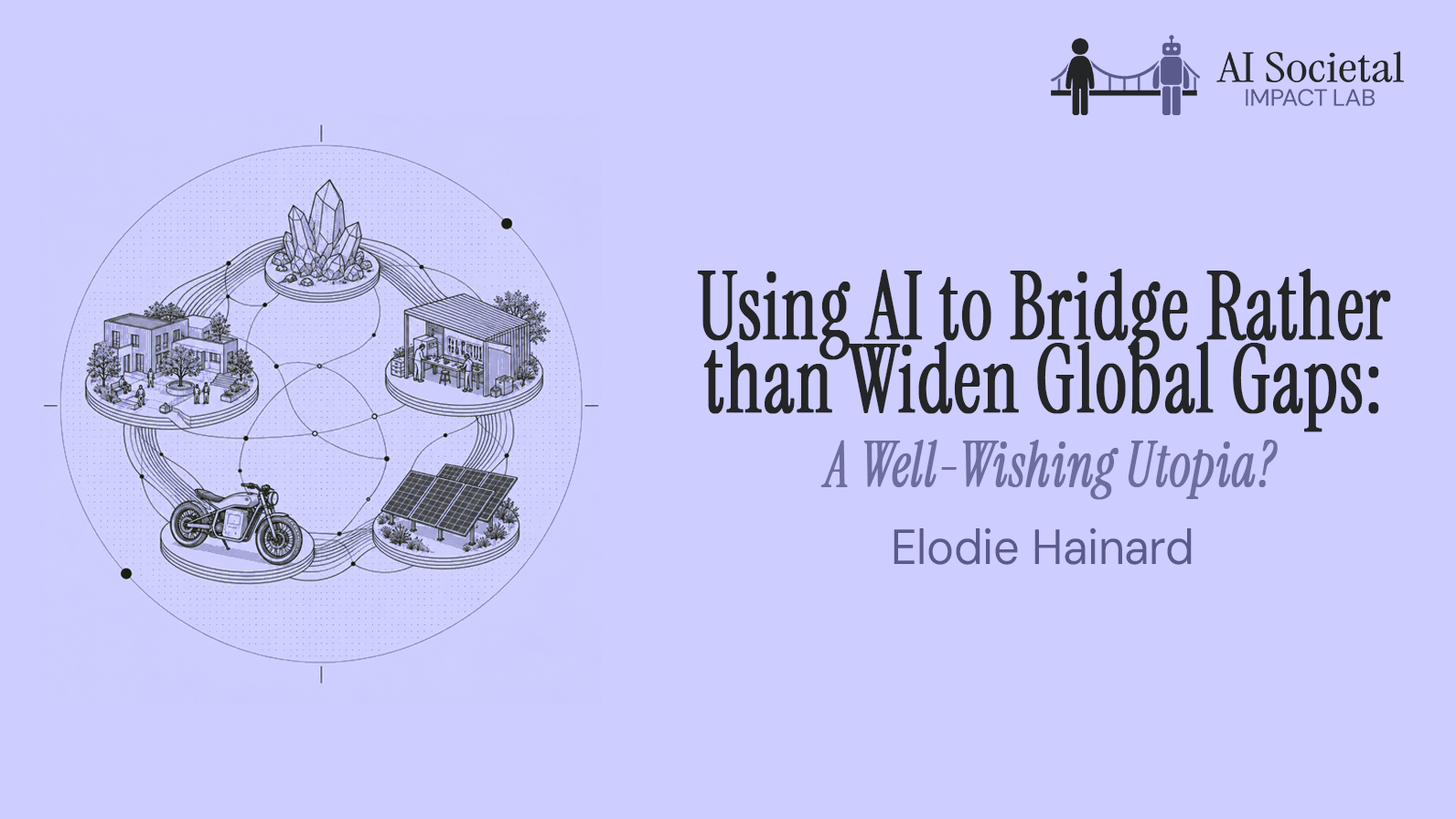
<style>
.page{position:relative;width:1456px;height:819px;background:#cdcdff}
.page>*{position:absolute;margin:0}
.t1{font:92.9px/73.4px "InstrumentSerif-Regular";letter-spacing:0.005em;color:#232526;font-weight:bold;scale:0.81 1}
.t2{font:92.9px/82.5px "InstrumentSerif-Regular";letter-spacing:0.005em;color:#232526;font-weight:bold;scale:0.81 1}
.t3{font:62.1px/73.4px "InstrumentSerif-Italic";letter-spacing:0.005em;color:#6d6d9f;font-weight:bold;scale:0.81 1}
.t4{font:49.4px "DMSans9pt-Regular";letter-spacing:-0.005em;color:#5a5a8c;scale:0.93 1}
</style>
<div class="page">
<p class="t1" style="left:697px;top:269px;width:694px;height:231px;text-align:center"><span class="t2"><br></span>Using AI to Bridge Rather <br>than Widen Global Gaps: <br><span class="t3">A Well-Wishing Utopia?</span></p>
<p class="t4" style="left:893px;top:528px;width:298px;height:37px">Elodie Hainard</p>
</div>
